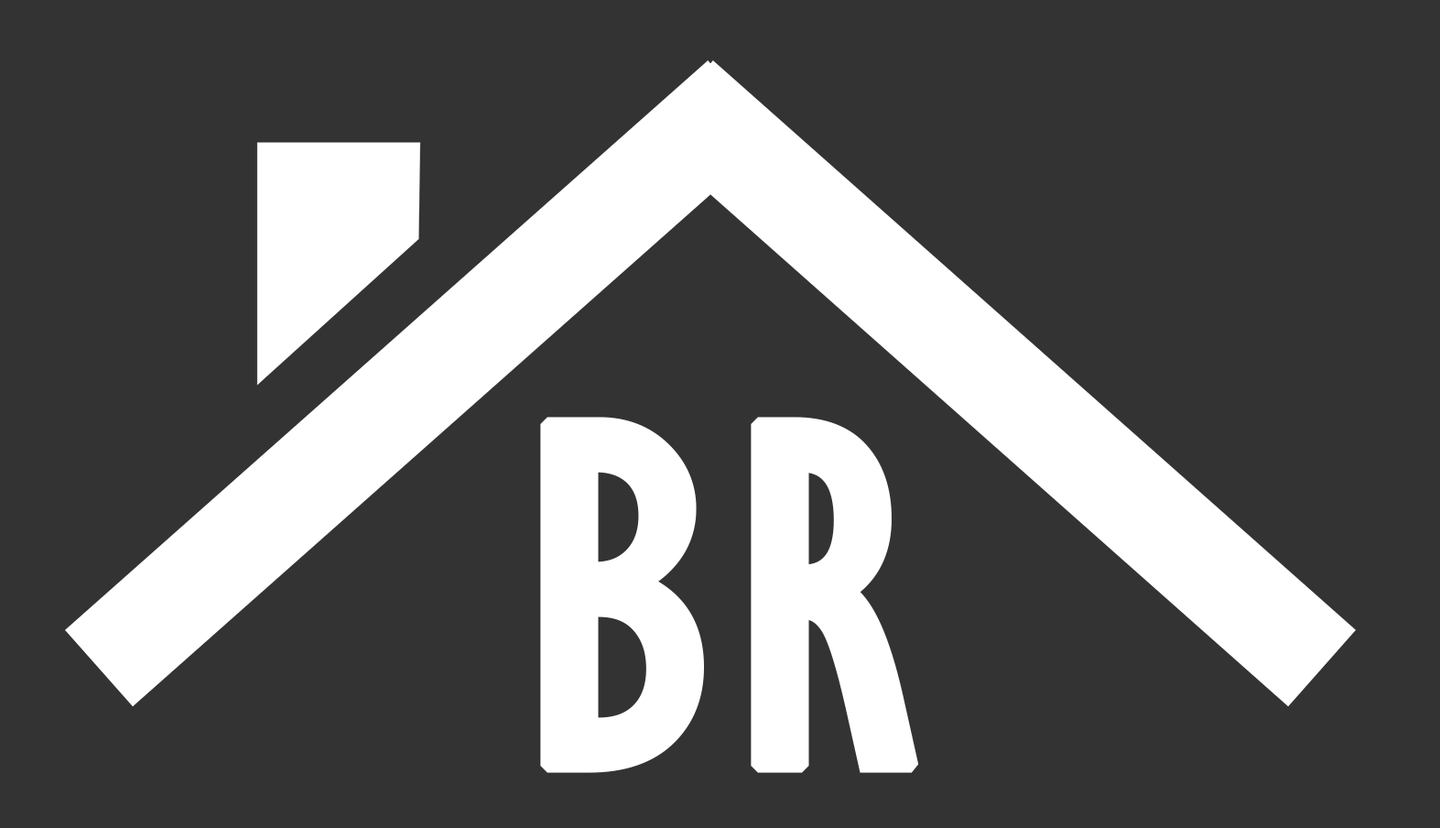
<style>
.page{position:relative;width:1440px;height:828px;background:#333333}
.page>*{position:absolute;margin:0}
.t1{font:511px "GillSansMT-Condensed";color:#ffffff;font-weight:bold}
</style>
<div class="page">
<p class="t1" style="left:540px;top:417px;width:379px;height:356px">BR</p>
</div>
